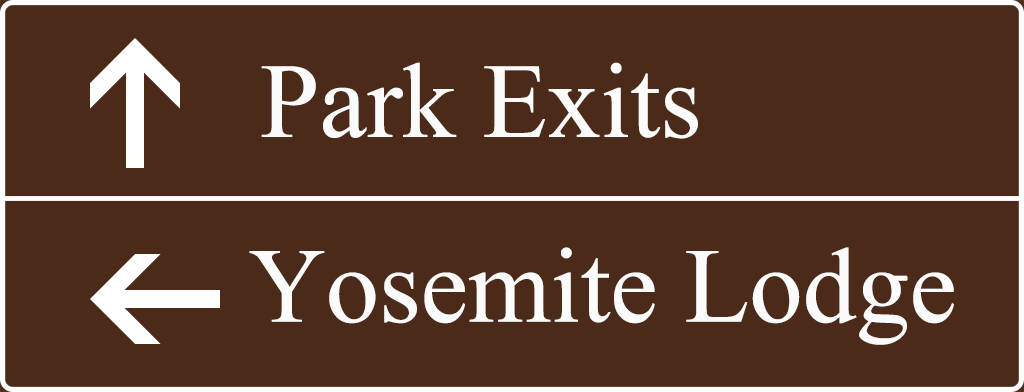
<style>
.page{position:relative;width:1024px;height:392px;background:#4c2a19}
.page>*{position:absolute;margin:0}
.t1{font:106.7px "IskoolaPota";color:#fbfbfb}
</style>
<div class="page">
<p class="t1" style="left:261px;top:62px;width:437px;height:77px">Park Exits</p>
<p class="t1" style="left:249px;top:247px;width:705px;height:98px">Yosemite Lodge</p>
</div>
